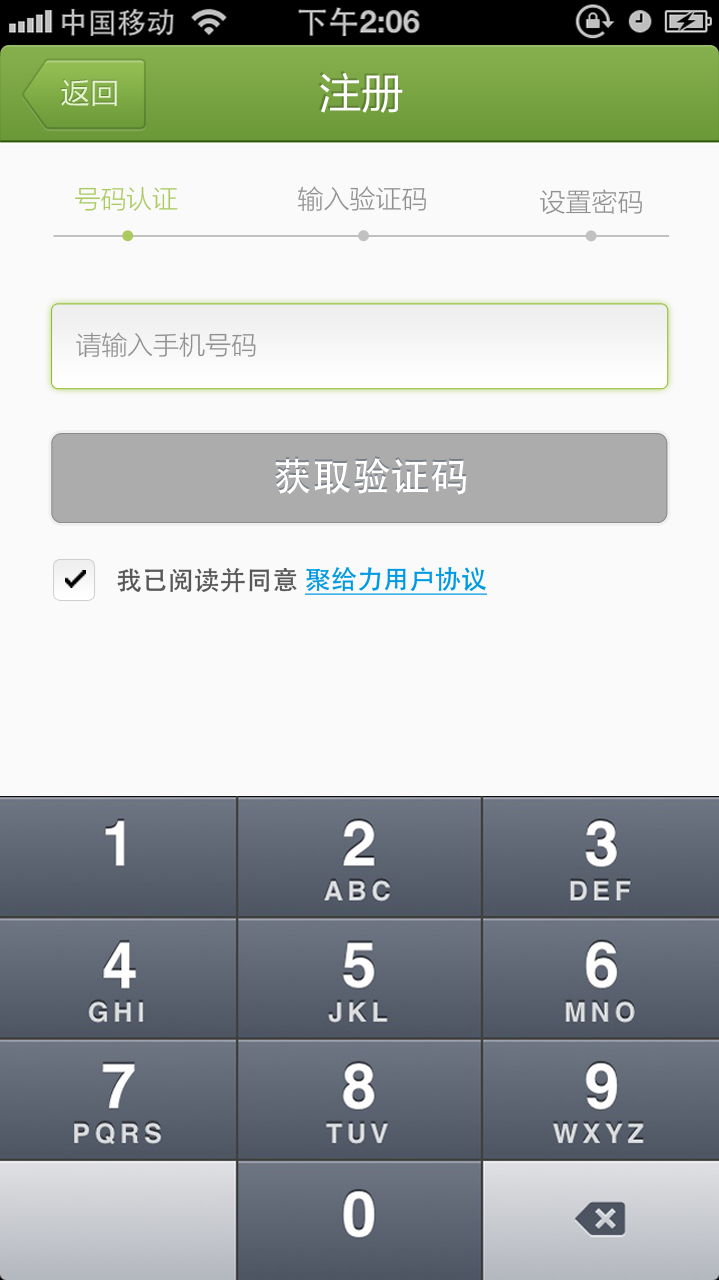
<style>
.page{position:relative;width:719px;height:1280px;background:#fafafa}
.page>*{position:absolute;margin:0}
.t1{font:42.7px "FZLTHJW--GB1-0";color:#ffffff}
.t2{font:29.2px "FZLTHJW--GB1-0";color:#dddddd}
.t3{font:26px "FZLTXHJW--GB1-0";color:#abcb61}
.t4{font:26px "FZLTXHJW--GB1-0";color:#909090}
.t5{font:38.5px "AdobeHeitiStd-Regular";color:#ffffff}
.t6{font:26px "AdobeHeitiStd-Regular";color:#585858}
.t7{font:26px "AdobeHeitiStd-Regular";color:#009ae2;text-decoration:underline}
</style>
<div class="page">
<p class="t1" style="left:320px;top:73px;width:83px;height:40px">注册</p>
<p class="t2" style="left:61px;top:79px;width:56px;height:27px">返回</p>
<p class="t3" style="left:75px;top:186px;width:103px;height:25px">号码认证</p>
<p class="t4" style="left:298px;top:186px;width:128px;height:25px">输入验证码</p>
<p class="t4" style="left:540px;top:189px;width:102px;height:25px">设置密码</p>
<p class="t4" style="left:76px;top:332px;width:180px;height:26px">请输入手机号码</p>
<p class="t5" style="left:275px;top:458px;width:192px;height:37px">获取验证码</p>
<p class="t6" style="left:117px;top:567px;width:180px;height:26px">我已阅读并同意</p>
<p class="t7" style="left:305px;top:567px;width:182px;height:28px">聚给力用户协议</p>
</div>
